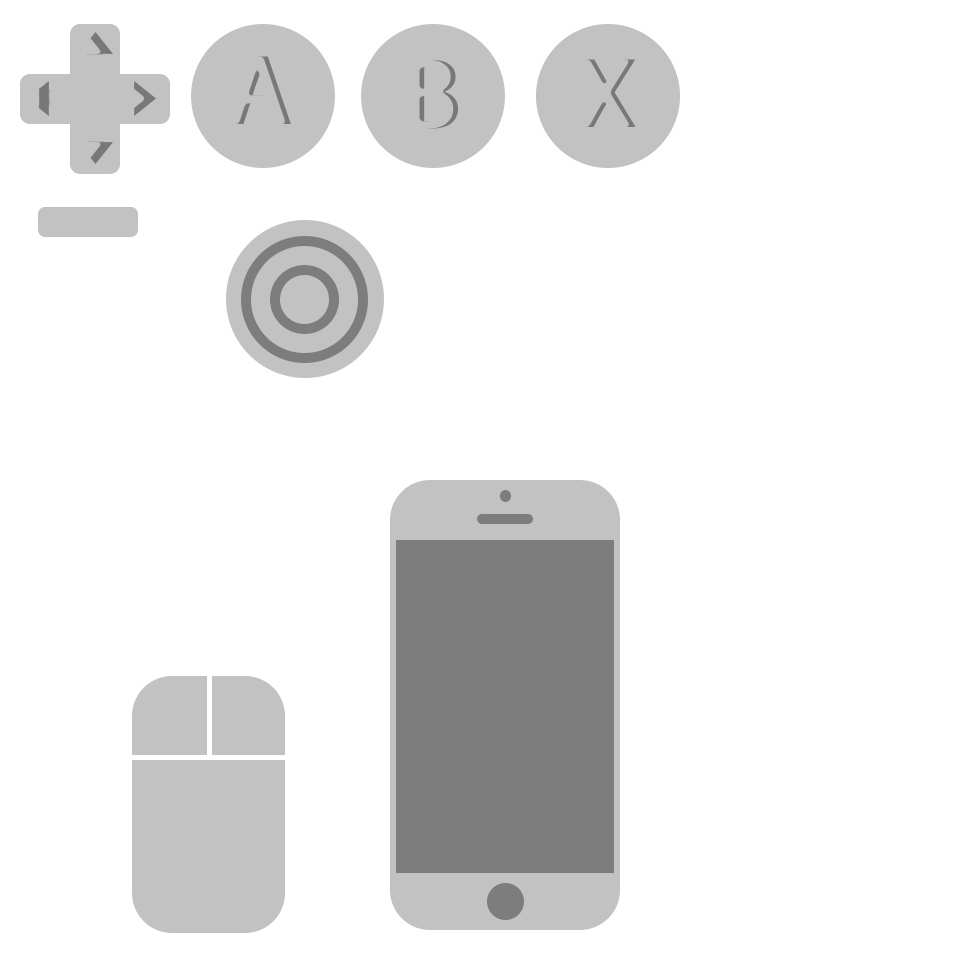
<style>
.page{position:relative;width:960px;height:960px;background:#ffffff}
.page>*{position:absolute;margin:0}
.t1{font:100px "MyriadPro-Regular"}
.t2{font:100px "MyriadPro-Regular";color:#c2c2c2}
</style>
<div class="page">
<p class="t1" style="left:234px;top:56px;width:57px;height:68px">A</p>
<p class="t2" style="left:415px;top:60px;width:43px;height:69px">B</p>
<p class="t1" style="left:583px;top:59px;width:53px;height:68px">X</p>
</div>
